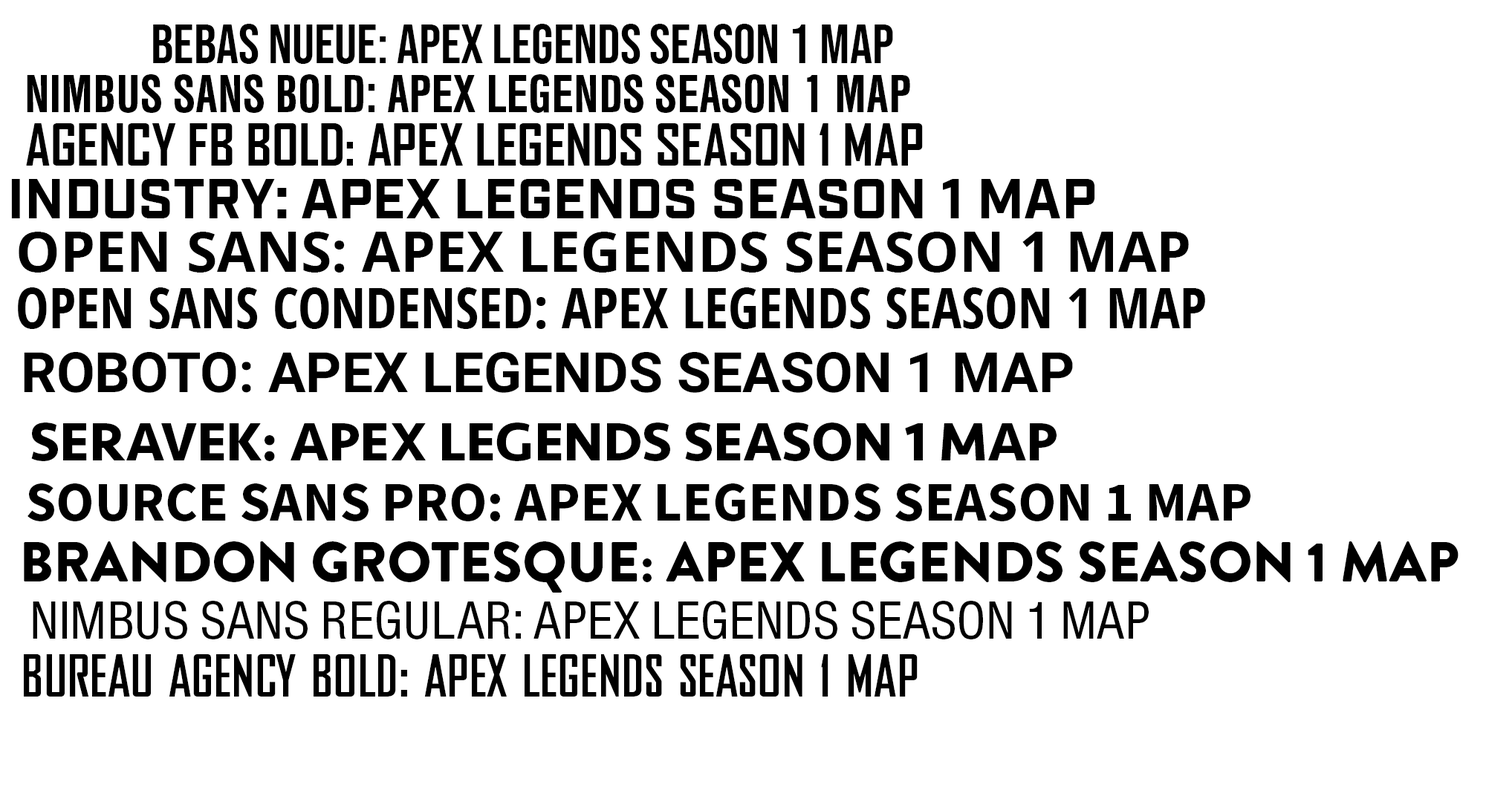
<style>
.page{position:relative;width:1486px;height:802px;background:#ffffff}
.page>*{position:absolute;margin:0}
.t1{font:55.7px "BebasNeue-Regular";color:#000000}
.t2{font:55.7px "NimbusSansT-BoldCondensed";color:#000000}
.t3{font:55.7px "AgencyFB-Bold";color:#000000}
.t4{font:55.7px "Industry-Bold";color:#000000}
.t5{font:55.7px "OpenSans-Bold";color:#000000}
.t6{font:55.7px "OpenSans-CondensedBold";color:#000000}
.t7{font:55.7px "Roboto-Bold";color:#000000}
.t8{font:55.7px "Seravek-Bold";color:#000000}
.t9{font:55.7px "SourceSansPro-Bold";color:#000000}
.t10{font:55.7px "BrandonGrotesque-Black";color:#000000}
.t11{font:55.7px "NimbusSansT-RegularCondensed";color:#000000}
.t12{font:55.7px "BureauAgencyFB-Bold";color:#000000}
</style>
<div class="page">
<p class="t1" style="left:153px;top:24px;width:740px;height:40px">Bebas Nueue: apex legends season 1 map</p>
<p class="t2" style="left:27px;top:74px;width:883px;height:39px">NIMBUS SANS BOLD: APEX LEGENDS SEASON 1 MAP</p>
<p class="t3" style="left:26px;top:123px;width:897px;height:43px">AGENCY FB BOLD: APEX LEGENDS SEASON 1 MAP</p>
<p class="t4" style="left:11px;top:179px;width:1084px;height:39px">INDUSTRY: APEX LEGENDS SEASON 1 MAP</p>
<p class="t5" style="left:19px;top:232px;width:1170px;height:41px">OPEN SANS: APEX LEGENDS SEASON 1 MAP</p>
<p class="t6" style="left:18px;top:288px;width:1187px;height:41px">OPEN SANS CONDENSED: APEX LEGENDS SEASON 1 MAP</p>
<p class="t7" style="left:24px;top:352px;width:1049px;height:41px">ROBOTO: APEX LEGENDS SEASON 1 MAP</p>
<p class="t8" style="left:31px;top:423px;width:1026px;height:38px">SERAVEK: APEX LEGENDS SEASON 1 MAP</p>
<p class="t9" style="left:27px;top:484px;width:1223px;height:38px">SOURCE SANS PRO: APEX LEGENDS SEASON 1 MAP</p>
<p class="t10" style="left:24px;top:542px;width:1435px;height:51px">BRANDON GROTESQUE: APEX LEGENDS SEASON 1 MAP</p>
<p class="t11" style="left:33px;top:601px;width:1116px;height:39px">NIMBUS SANS REGULAR: APEX LEGENDS SEASON 1 MAP</p>
<p class="t12" style="left:24px;top:655px;width:894px;height:42px">BUREAU AGENCY BOLD: APEX LEGENDS SEASON 1 MAP</p>
</div>
